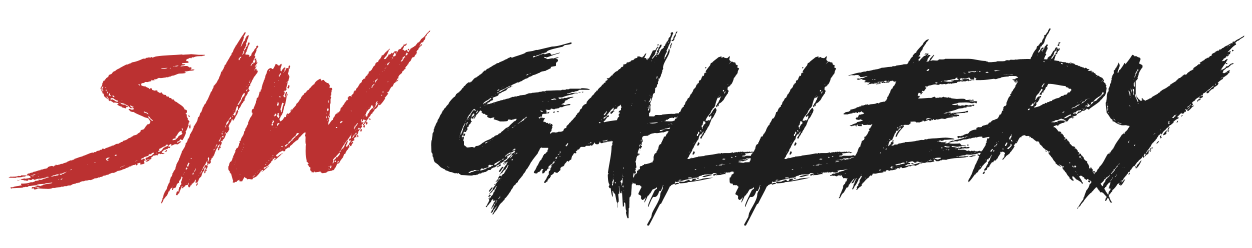
<style>
.page{position:relative;width:1252px;height:248px;background:#ffffff}
.page>*{position:absolute;margin:0}
.t1{font:160px "RoadRage";color:#1e1e1e;scale:1.1 1}
.t2{font:160px "RoadRage";color:#bb3131;scale:1.1 1}
</style>
<div class="page">
<p class="t1" style="left:8px;top:28px;width:1237px;height:198px"><span class="t2">SIW </span>GALLERY</p>
</div>
